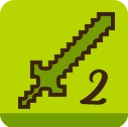
<style>
.page{position:relative;width:128px;height:127px;background:#b7d500}
.page>*{position:absolute;margin:0}
.t1{font:48px "CreamPeach-Regular";color:#3c2211}
</style>
<div class="page">
<p class="t1" style="left:79px;top:69px;width:29px;height:36px">2</p>
</div>
